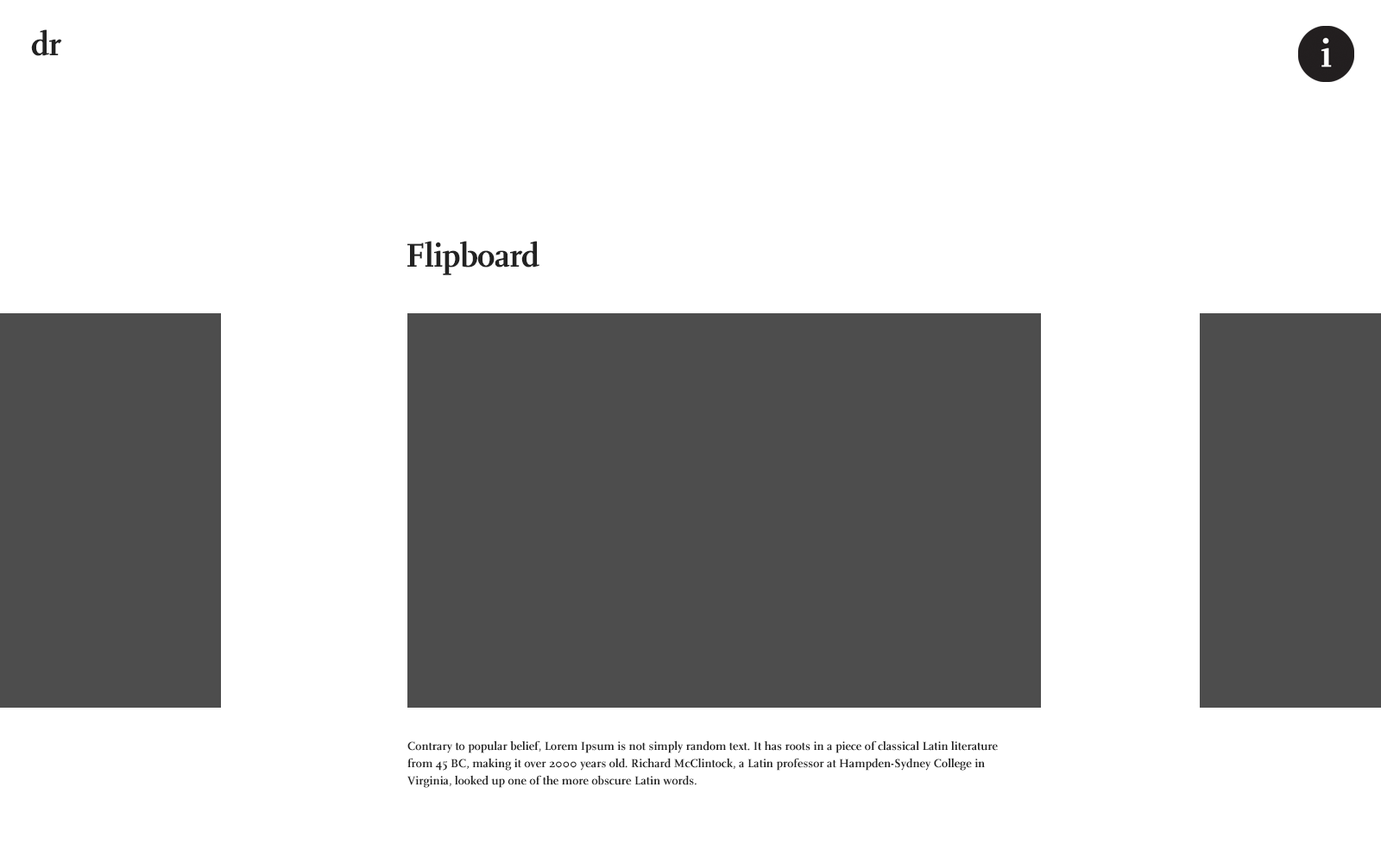
<style>
.page{position:relative;width:1381px;height:863px;background:#ffffff}
.page>*{position:absolute;margin:0}
.t1{font:34.5px "FFScala-Bold";letter-spacing:-0.02em;color:#222222}
.t2{font:12.1px/17.3px "FFScala-Bold";color:#222222}
</style>
<div class="page">
<p class="t1" style="left:31px;top:29px;width:31px;height:27px">dr</p>
<p class="t1" style="left:407px;top:241px;width:133px;height:34px">Flipboard</p>
<p class="t2" style="left:407px;top:741px;width:591px;height:47px">Contrary to popular belief, Lorem Ipsum is not simply random text. It has roots in a piece of classical Latin literature from 45 BC, making it over 2000 years old. Richard McClintock, a Latin professor at Hampden-Sydney College in Virginia, looked up one of the more obscure Latin words.</p>
</div>
